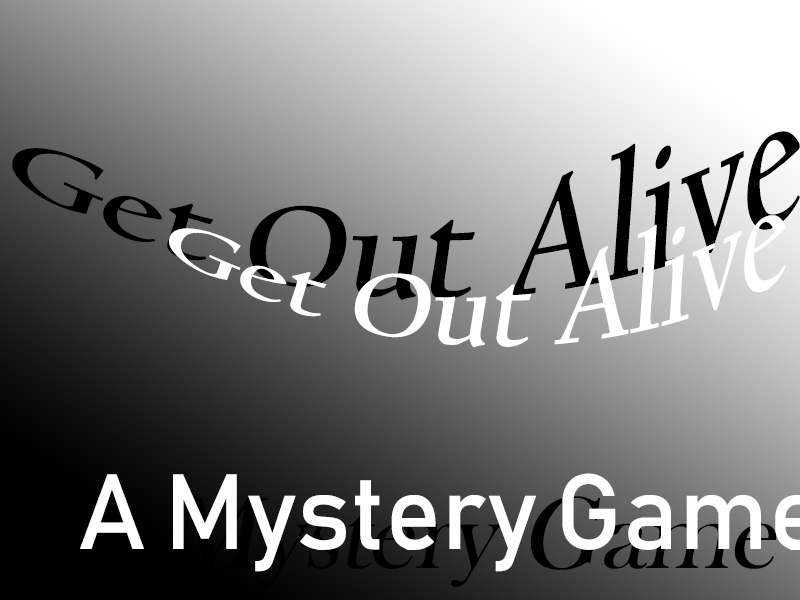
<style>
.page{position:relative;width:800px;height:600px}
.page>*{position:absolute;margin:0}
.t1{font:134.2px "CalifornianFB-Bold";color:#000000;font-style:italic}
.t2{font:105px "CalifornianFB-Bold";color:#ffffff;font-style:italic}
.t3{font:105px "BaskOldFace";color:#000000;font-style:italic}
</style>
<div class="page">
<p class="t1" style="left:12px;top:131px;width:788px;height:169px">Get Out Alive</p>
<p class="t2" style="left:169px;top:215px;width:617px;height:133px">Get Out Alive</p>
<p class="t3" style="left:65px;top:496px;width:712px;height:91px">A Mystery Game</p>
</div>
